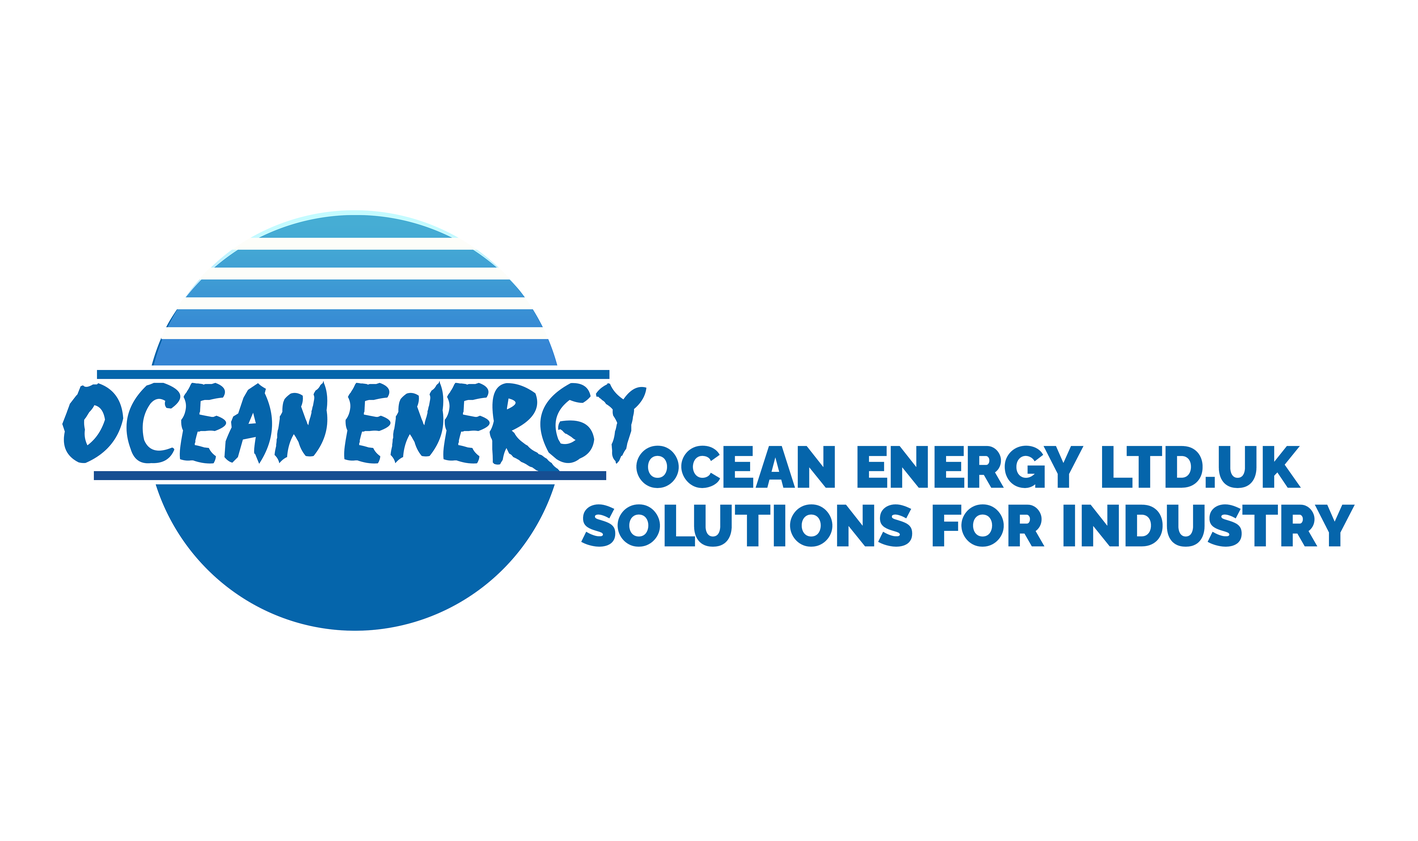
<style>
.page{position:relative;width:1418px;height:841px;background:#ffffff}
.page>*{position:absolute;margin:0}
.t1{font:58.6px/58.6px "RalewayRoman-Black";letter-spacing:0.02em;color:#0565ab}
</style>
<div class="page">
<p class="t1" style="left:581px;top:445px;width:774px;height:102px;text-align:center">OCEAN ENERGY LTD.UK<br>SOLUTIONS FOR INDUSTRY</p>
</div>
